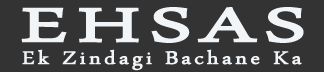
<style>
.page{position:relative;width:324px;height:72px;background:#333333}
.page>*{position:absolute;margin:0}
.t1{font:68.2px "ArabicTypesetting";letter-spacing:0.1em;color:#f2f5f8;font-weight:bold;scale:1.7 1}
.t2{font:26.2px "ArabicTypesetting";letter-spacing:0.1em;color:#f2f5f8;font-weight:bold;scale:1.2 1}
</style>
<div class="page">
<p class="t1" style="left:21px;top:7px;width:283px;height:36px">EHSAS</p>
<p class="t2" style="left:22px;top:49px;width:280px;height:22px">Ek Zindagi Bachane Ka</p>
</div>
